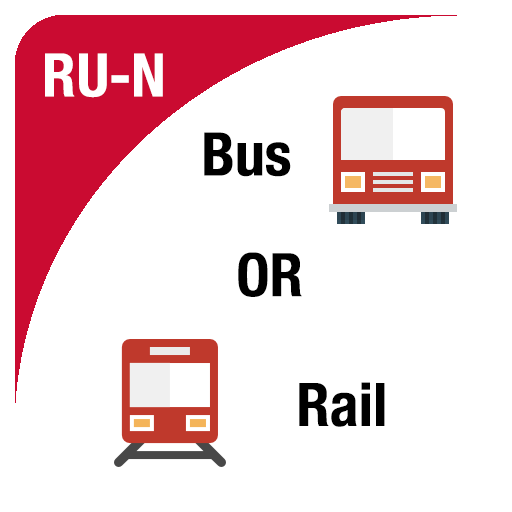
<style>
.page{position:relative;width:512px;height:512px;background:#ffffff}
.page>*{position:absolute;margin:0}
.t1{font:60px "HelveticaNeue-CondensedBold";color:#ffffff}
.t2{font:60px "HelveticaNeue-CondensedBold";color:#000000}
</style>
<div class="page">
<p class="t1" style="left:45px;top:53px;width:118px;height:45px">RU-N</p>
<p class="t2" style="left:204px;top:132px;width:87px;height:45px">Bus</p>
<p class="t2" style="left:238px;top:252px;width:64px;height:45px">OR</p>
<p class="t2" style="left:299px;top:382px;width:86px;height:45px">Rail</p>
</div>
